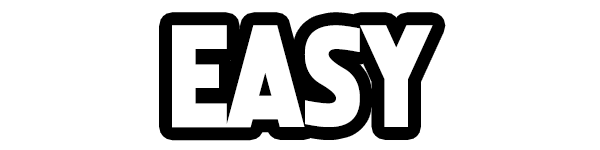
<style>
.page{position:relative;width:600px;height:150px;background:#ffffff}
.page>*{position:absolute;margin:0}
.t1{font:160px "SheSmiles";color:#ffffff}
</style>
<div class="page">
<p class="t1" style="left:172px;top:25px;width:261px;height:103px">EASY</p>
</div>
